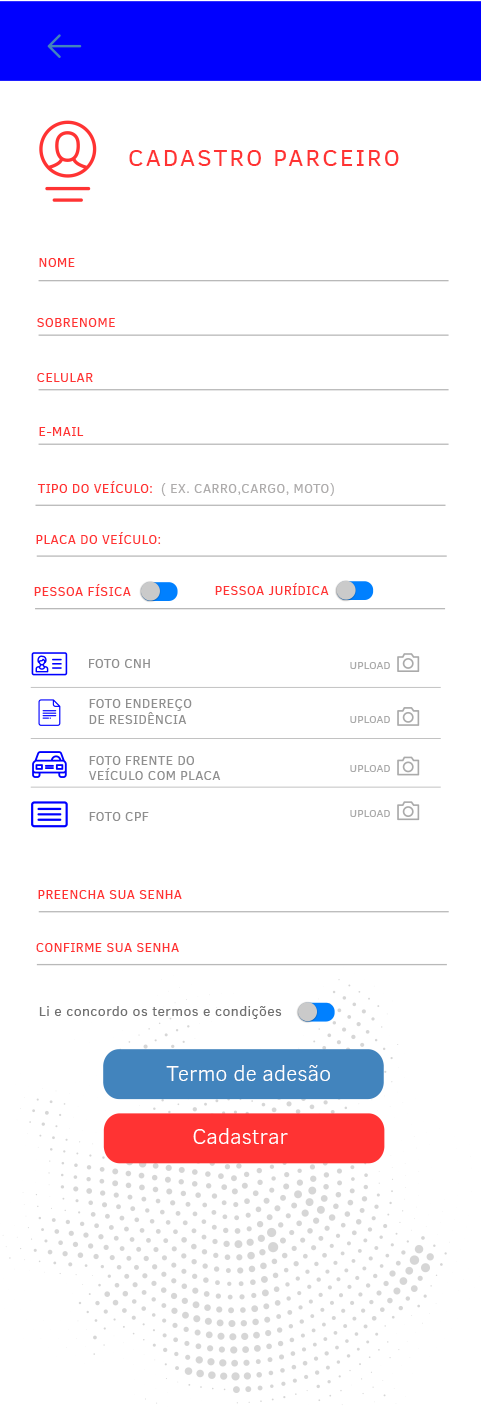
<style>
.page{position:relative;width:481px;height:1407px;background:#ffffff}
.page>*{position:absolute;margin:0}
.t1{font:23.8px "ClearSans";letter-spacing:0.1em;color:#ff3333}
.t2{font:13.4px "ClearSans";letter-spacing:0.02em;color:#ff3333}
.t3{font:13.4px "ClearSans";letter-spacing:0.02em;color:#aeacac}
.t4{font:13.3px "ClearSans";letter-spacing:0.02em;color:#8f8f8f}
.t5{font:11px "ClearSans";letter-spacing:0.02em;color:#aaaaaa}
.t6{font:14.3px "ClearSans";letter-spacing:0.02em;color:#707070}
.t7{font:21.8px "ClearSans-Light";color:#ffffff}
</style>
<div class="page">
<p class="t1" style="left:129px;top:150px;width:270px;height:16px">CADASTRO PARCEIRO</p>
<p class="t2" style="left:39px;top:258px;width:36px;height:9px">NOME</p>
<p class="t2" style="left:37px;top:318px;width:78px;height:9px">SOBRENOME</p>
<p class="t2" style="left:37px;top:373px;width:56px;height:9px">CELULAR</p>
<p class="t2" style="left:39px;top:427px;width:45px;height:9px">E-MAIL</p>
<p class="t3" style="left:37px;top:481px;width:297px;height:15px"><span class="t2">TIPO DO VEÍCULO:  </span>( EX. CARRO,CARGO, MOTO)</p>
<p class="t2" style="left:36px;top:532px;width:125px;height:12px">PLACA DO VEÍCULO:</p>
<p class="t2" style="left:34px;top:584px;width:97px;height:12px">PESSOA FÍSICA</p>
<p class="t2" style="left:215px;top:583px;width:114px;height:12px">PESSOA JURÍDICA</p>
<p class="t4" style="left:89px;top:659px;width:61px;height:9px">FOTO CNH</p>
<p class="t5" style="left:350px;top:662px;width:40px;height:7px">UPLOAD</p>
<p class="t4" style="left:89px;top:699px;width:103px;height:25px">FOTO ENDEREÇO<br>DE RESIDÊNCIA</p>
<p class="t5" style="left:350px;top:716px;width:40px;height:7px">UPLOAD</p>
<p class="t4" style="left:89px;top:756px;width:132px;height:24px">FOTO FRENTE DO <br>VEÍCULO COM PLACA</p>
<p class="t5" style="left:350px;top:765px;width:40px;height:7px">UPLOAD</p>
<p class="t4" style="left:89px;top:812px;width:60px;height:9px">FOTO CPF</p>
<p class="t5" style="left:350px;top:810px;width:40px;height:7px">UPLOAD</p>
<p class="t2" style="left:38px;top:890px;width:144px;height:9px">PREENCHA SUA SENHA</p>
<p class="t2" style="left:36px;top:943px;width:143px;height:9px">CONFIRME SUA SENHA</p>
<p class="t6" style="left:39px;top:1006px;width:243px;height:13px">Li e concordo os termos e condições</p>
<p class="t7" style="left:166px;top:1065px;width:164px;height:16px">Termo de adesão</p>
<p class="t7" style="left:193px;top:1128px;width:95px;height:16px">Cadastrar</p>
</div>
